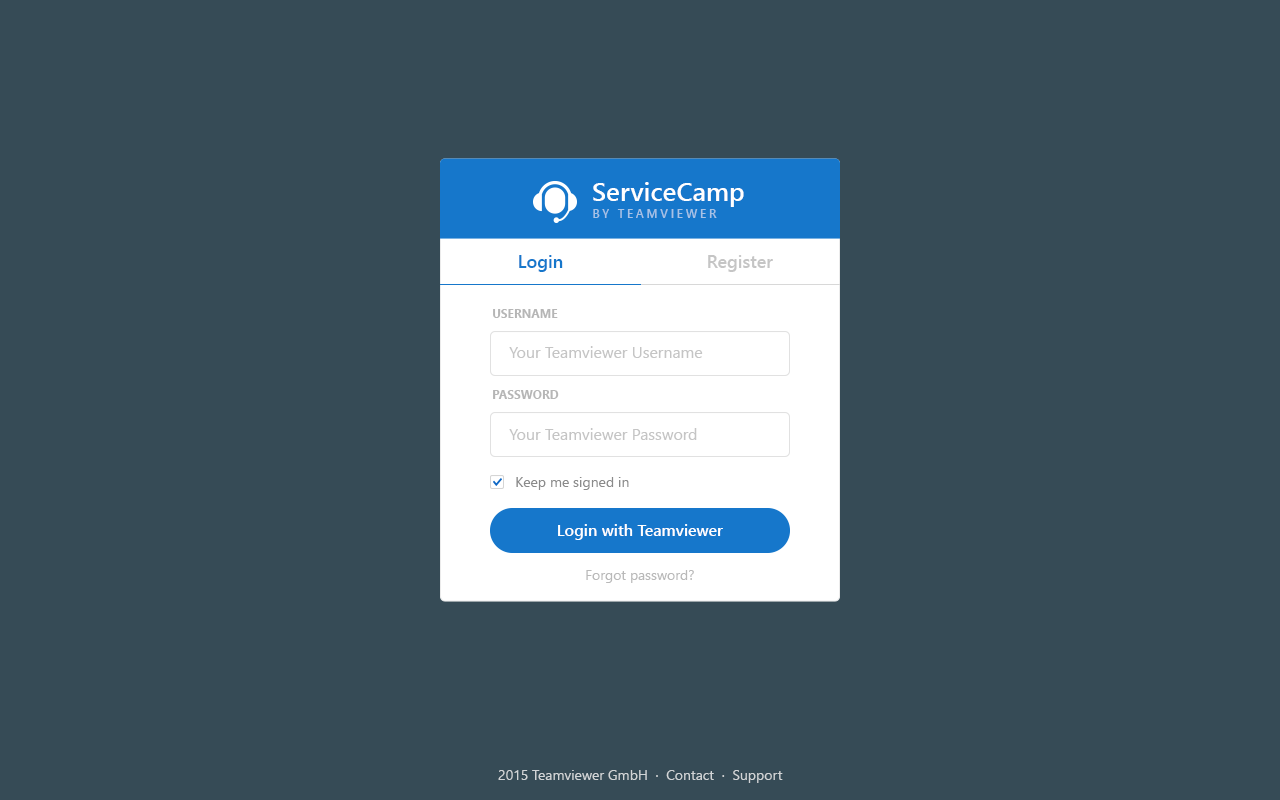
<style>
.page{position:relative;width:1280px;height:800px;background:#364b56}
.page>*{position:absolute;margin:0}
.t1{font:26px "SegoeUI-Semibold";color:#ffffff}
.t2{font:12px "SegoeUI-Semibold";letter-spacing:0.22em;color:#a7c3e6;text-transform:uppercase}
.t3{font:18px "SegoeUI-Semibold";color:#1677cb}
.t4{font:18px "SegoeUI-Semibold";color:#c5c5c5}
.t5{font:12px "SegoeUI-Bold";color:#b6b6b6;text-transform:uppercase}
.t6{font:16px "SegoeUI";color:#c5c5c5}
.t7{font:14px "SegoeUI";color:#8b8b8b}
.t8{font:16px "SegoeUI-Semibold";color:#ffffff}
.t9{font:14px "SegoeUI";color:#b9b9b9}
.t10{font:14px "SegoeUI";color:#d1d4d6}
</style>
<div class="page">
<p class="t1" style="left:593px;top:182px;width:151px;height:25px">ServiceCamp</p>
<p class="t2" style="left:593px;top:209px;width:124px;height:9px">by Teamviewer</p>
<p class="t3" style="left:519px;top:255px;width:44px;height:17px">Login</p>
<p class="t4" style="left:708px;top:255px;width:65px;height:17px">Register</p>
<p class="t5" style="left:493px;top:309px;width:65px;height:9px">Username</p>
<p class="t6" style="left:509px;top:346px;width:194px;height:12px">Your Teamviewer Username</p>
<p class="t5" style="left:493px;top:390px;width:66px;height:9px">Password</p>
<p class="t6" style="left:509px;top:428px;width:188px;height:12px">Your Teamviewer Password</p>
<p class="t7" style="left:516px;top:477px;width:113px;height:13px">Keep me signed in</p>
<p class="t8" style="left:558px;top:524px;width:165px;height:16px">Login with Teamviewer</p>
<p class="t9" style="left:586px;top:570px;width:108px;height:13px">Forgot password?</p>
<p class="t10" style="left:498px;top:770px;width:285px;height:13px">2015 Teamviewer GmbH  ·  Contact  ·  Support</p>
</div>
